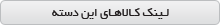
<style>
.page{position:relative;width:220px;height:25px}
.page>*{position:absolute;margin:0}
.t1{font:13.2px "BYekan";color:#231f20}
</style>
<div class="page">
<p class="t1" style="left:52px;top:8px;width:117px;height:11px">لـینک کـالاهـای این دسته</p>
</div>
